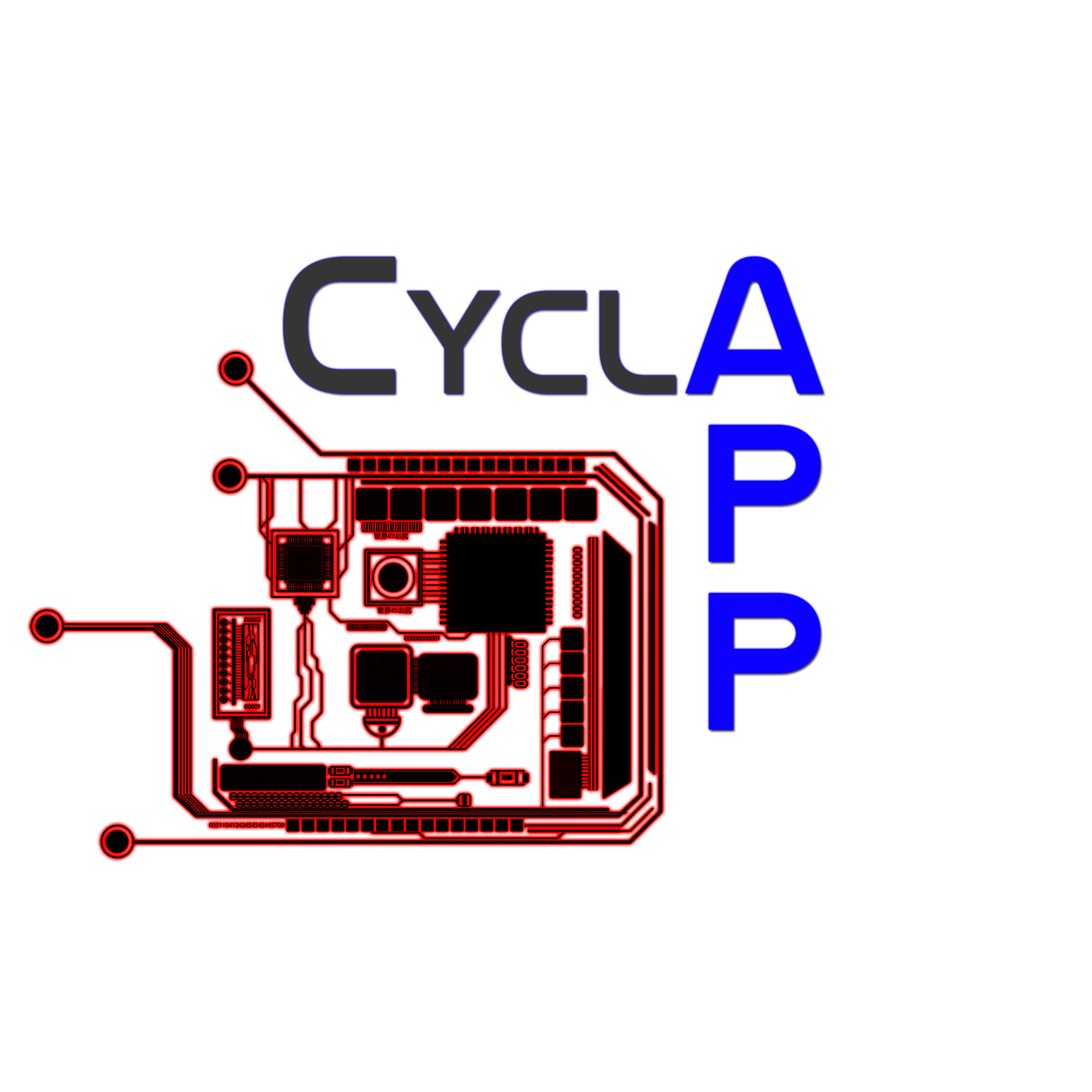
<style>
.page{position:relative;width:1092px;height:1092px;background:#ffffff}
.page>*{position:absolute;margin:0}
.t1{font:197.8px/168.1px "NasalizationRg-Regular";color:#0c00ff}
.t2{font:197.8px/168.1px "NasalizationRg-Regular";color:#353535}
.t3{font:148.4px/168.1px "NasalizationRg-Regular";color:#353535}
</style>
<div class="page">
<p class="t1" style="left:283px;top:257px;width:540px;height:472px;text-align:right"><span class="t2">C</span><span class="t3">YCL</span>a<br>p<br>p</p>
</div>
